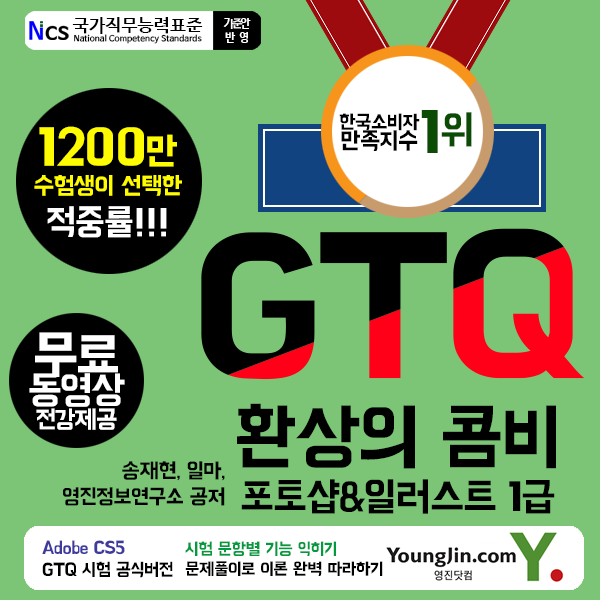
<style>
.page{position:relative;width:600px;height:600px;background:#7cc576}
.page>*{position:absolute;margin:0}
.t1{font:8.4px "NanumBarunGothicBold";letter-spacing:0.02em;color:#000000}
.t2{font:17.7px "NanumBarunGothicBold";letter-spacing:0.02em;color:#000000}
.t3{font:11.5px "NanumBarunGothicBold";letter-spacing:-0.16em;color:#ffffff}
.t4{font:11.5px "NanumBarunGothicBold";letter-spacing:0.34em;color:#ffffff}
.t5{font:19.9px "BMHANNAPro";letter-spacing:-0.03em;color:#000000}
.t6{font:24.2px/19.5px "BMHANNAPro";letter-spacing:-0.03em;color:#000000}
.t7{font:58.7px "BMHANNAPro";letter-spacing:-0.03em;color:#0a4c04}
.t8{font:40.7px "BMHANNAPro";letter-spacing:-0.03em;color:#0a4c04}
.t9{font:24.7px "BMHANNAPro";letter-spacing:-0.03em;color:#fffc01}
.t10{font:52.7px "BMHANNAPro";letter-spacing:-0.03em;color:#fffc01}
.t11{font:38.7px "BMHANNAPro";letter-spacing:-0.03em;color:#fffc01}
.t12{font:36.7px/40px "BMHANNAPro";letter-spacing:-0.03em;color:#ffffff}
.t13{font:25.2px/24.6px "BMHANNAPro";letter-spacing:-0.05em;color:#ffffff}
.t14{font:53.3px/31.6px "BMHANNAPro";letter-spacing:-0.05em;color:#ffffff}
.t15{font:39.2px/31.6px "BMHANNAPro";letter-spacing:-0.05em;color:#ffffff}
.t16{font:40.7px "BMHANNAPro";letter-spacing:-0.03em;color:#000000}
.t17{font:74.7px/43.2px "BMHANNAPro";letter-spacing:-0.03em;color:#000000}
.t18{font:74.7px "BMHANNAPro";letter-spacing:-0.03em;color:#000000}
.t19{font:21.5px "BMHANNAPro";letter-spacing:-0.03em;color:#000000}
.t20{font:18.3px "BMHANNAPro";letter-spacing:-0.03em;color:#000000}
.t21{font:18.3px "BMHANNAPro";letter-spacing:-0.03em;color:#3f3a9e}
.t22{font:17.2px "BMHANNAPro";letter-spacing:-0.03em;color:#000000}
.t23{font:17.2px "BMHANNAPro";letter-spacing:-0.03em;color:#039a3f}
</style>
<div class="page">
<p class="t1" style="left:72px;top:17px;width:131px;height:27px;text-align:center"><span class="t2">국가직무능력표준<br></span>National Competency Standards</p>
<p class="t3" style="left:223px;top:18px;width:28px;height:25px;text-align:center">기준안<br><span class="t4">반영</span></p>
<p class="t5" style="left:339px;top:113px;width:81px;height:38px;text-align:center">한국소비자<br><span class="t6">만족지수</span></p>
<p class="t7" style="left:421px;top:110px;width:51px;height:43px">1<span class="t8">위</span></p>
<p class="t9" style="left:34px;top:126px;width:148px;height:112px;text-align:center"><span class="t10">1200</span><span class="t11">만<br></span>수험생이 선택한<br><span class="t12">적중률!!!</span></p>
<p class="t13" style="left:29px;top:332px;width:96px;height:98px;text-align:center"><span class="t14">무료<br></span><span class="t15">동영상<br></span>전강제공</p>
<p class="t16" style="left:237px;top:403px;width:319px;height:111px;text-align:center"><span class="t17">환</span><span class="t18">상의 콤비<br></span>포토샵&amp;일러스트 1급</p>
<p class="t19" style="left:63px;top:461px;width:162px;height:45px;text-align:right">송재현, 일마,<br>영진정보연구소 공저</p>
<p class="t20" style="left:42px;top:540px;width:131px;height:38px"><span class="t21">Adobe CS5<br></span>GTQ 시험 공식버전</p>
<p class="t22" style="left:185px;top:541px;width:198px;height:35px"><span class="t23">시험 문항별 기능 익히기<br></span>문제풀이로 이론 완벽 따라하기</p>
</div>
